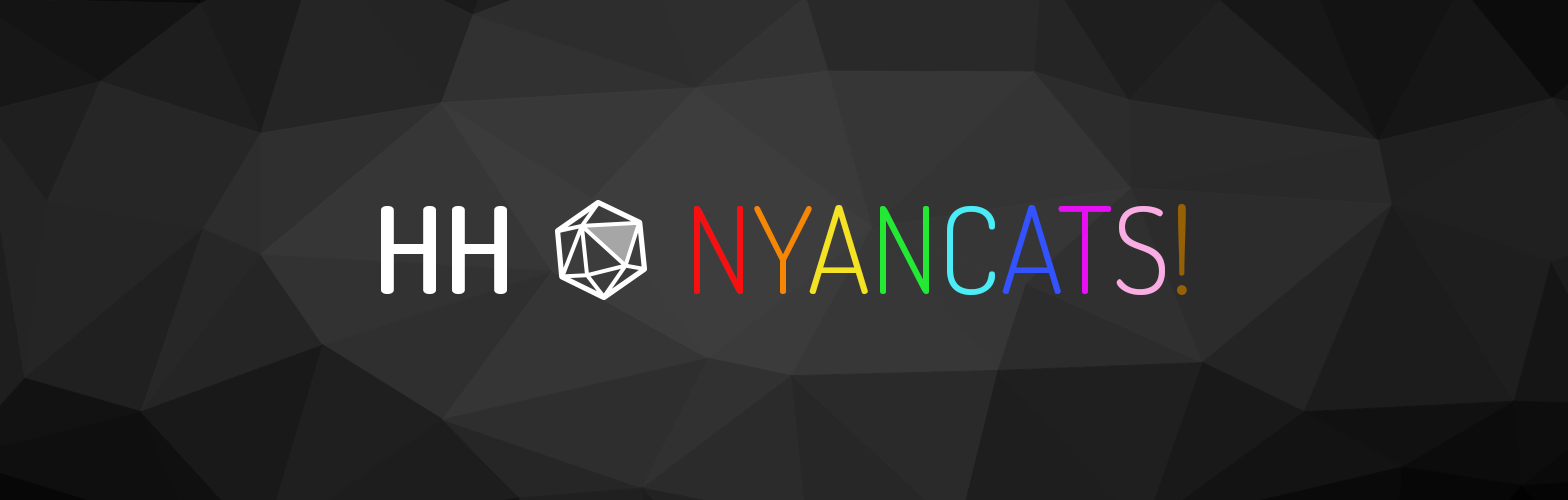
<style>
.page{position:relative;width:1568px;height:500px}
.page>*{position:absolute;margin:0}
.t1{font:120px "Dosis-SemiBold";color:#ffffff}
.t2{font:120px "Dosis-Light";color:#f80f0f}
.t3{font:120px "Dosis-Light";color:#f68704}
.t4{font:120px "Dosis-Light";color:#f4e324}
.t5{font:120px "Dosis-Light";color:#23e935}
.t6{font:120px "Dosis-Light";color:#4becf6}
.t7{font:120px "Dosis-Light";color:#3253fd}
.t8{font:120px "Dosis-Light";color:#e70ff4}
.t9{font:120px "Dosis-Light";color:#faade3}
.t10{font:120px "Dosis-Light";color:#966105}
</style>
<div class="page">
<p class="t1" style="left:381px;top:206px;width:126px;height:88px">HH</p>
<p class="t2" style="left:694px;top:204px;width:493px;height:91px">N<span class="t3">Y</span><span class="t4">A</span><span class="t5">N</span><span class="t6">C</span><span class="t7">A</span><span class="t8">T</span><span class="t9">S</span><span class="t10">!</span></p>
</div>
